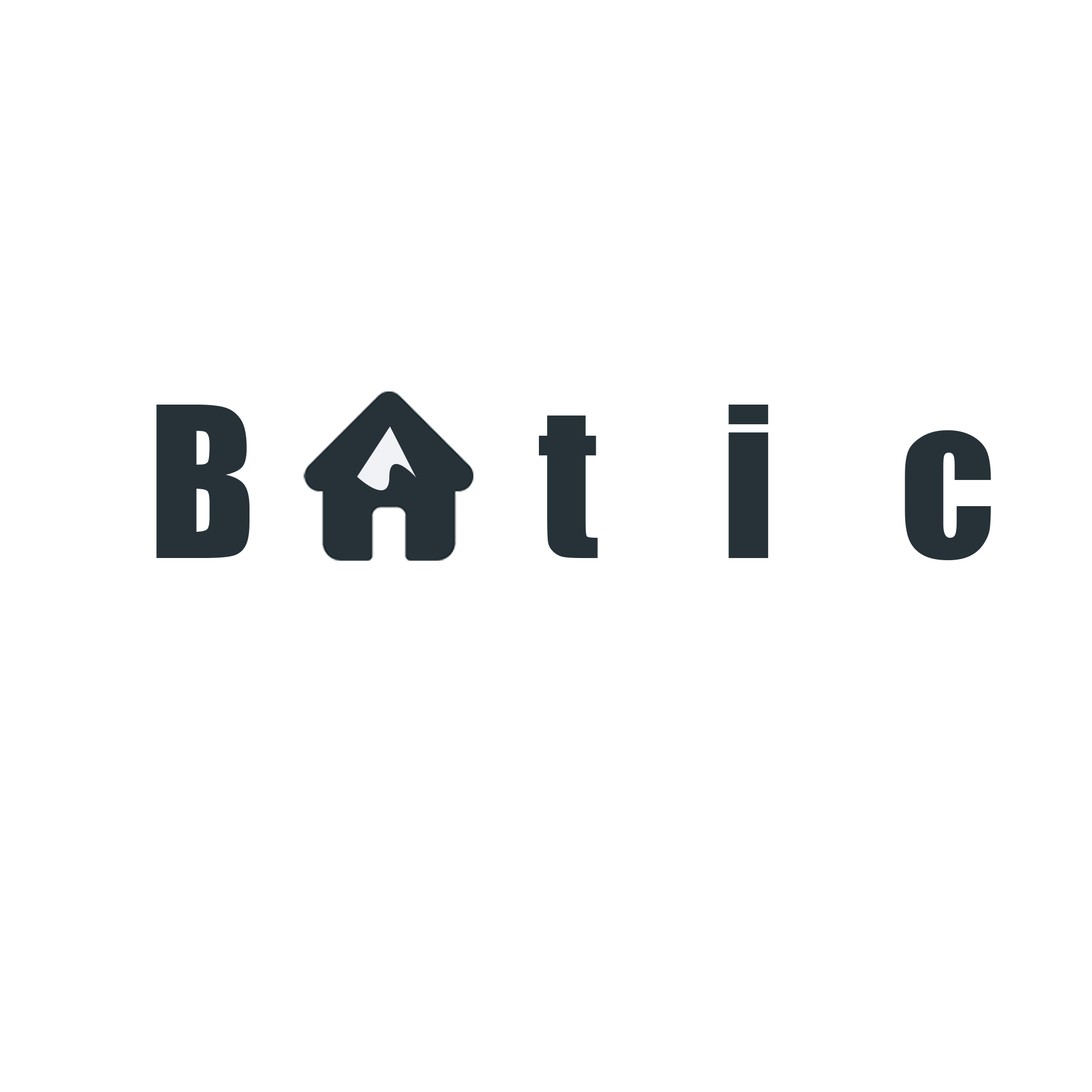
<style>
.page{position:relative;width:1092px;height:1092px;background:#ffffff}
.page>*{position:absolute;margin:0}
.t1{font:194.1px "Impact";letter-spacing:0.64em;color:#263238}
</style>
<div class="page">
<p class="t1" style="left:156px;top:405px;width:835px;height:155px">B tic</p>
</div>
